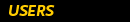
<style>
.page{position:relative;width:130px;height:22px;background:#000000}
.page>*{position:absolute;margin:0}
.t1{font:16px "ScalaSans-BoldLFItalic";letter-spacing:-0.01em;color:#ffcc00}
</style>
<div class="page">
<p class="t1" style="left:9px;top:5px;width:46px;height:11px">USERS</p>
</div>
